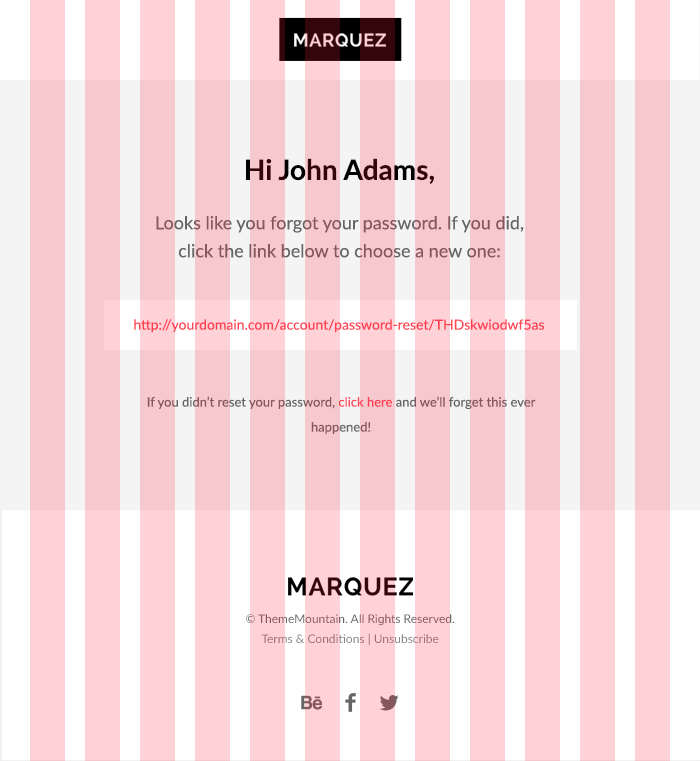
<style>
.page{position:relative;width:700px;height:761px;background:#f6c9cf}
.page>*{position:absolute;margin:0}
.t1{font:28px "Lato-Bold"}
.t2{font:18px/28px "Lato-Regular"}
.t3{font:14px "Lato-Regular";color:#ff4556}
.t4{font:13px/25px "Lato-Regular"}
.t5{font:12px/20px "Lato-Regular";color:#666666}
.t6{font:12px/20px "Lato-Regular";color:#888888}
</style>
<div class="page">
<p class="t1" style="left:246px;top:158px;width:188px;height:26px">Hi John Adams,</p>
<p class="t2" style="left:156px;top:216px;width:368px;height:42px;text-align:center">Looks like you forgot your password. If you did, <br>click the link below to choose a new one:</p>
<p class="t3" style="left:134px;top:319px;width:410px;height:14px">http://yourdomain.com/account/password-reset/THDskwiodwf5as</p>
<p class="t4" style="left:147px;top:396px;width:389px;height:38px;text-align:center">If you didn’t reset your password, click here and we’ll forget this ever happened!</p>
<p class="t5" style="left:246px;top:614px;width:209px;height:31px;text-align:center">© ThemeMountain. All Rights Reserved. <br><span class="t6">Terms &amp; Conditions | Unsubscribe</span></p>
</div>
